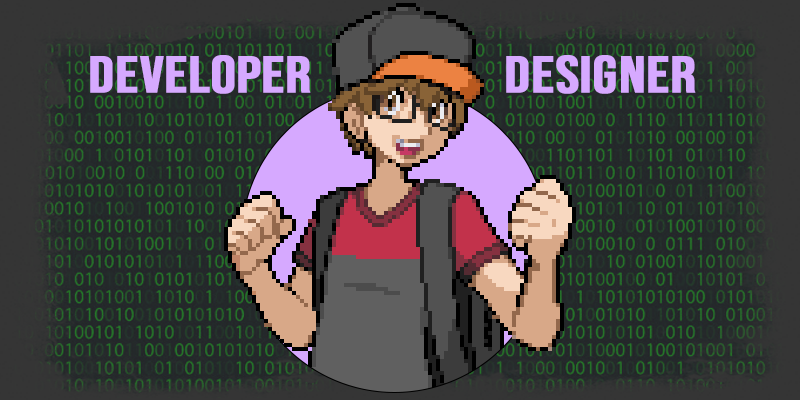
<style>
.page{position:relative;width:800px;height:400px}
.page>*{position:absolute;margin:0}
.t1{font:51.4px "BebasNeue-Regular";color:#d6a9ff;font-weight:bold;scale:1.19 1}
</style>
<div class="page">
<p class="t1" style="left:90px;top:55px;width:221px;height:39px">DEVELOPER</p>
<p class="t1" style="left:506px;top:55px;width:190px;height:39px">DESIGNER</p>
</div>
